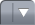
<style>
.page{position:relative;width:35px;height:25px;background:#a5abb6}
.page>*{position:absolute;margin:0}
.t1{font:12.8px "ArialMT";letter-spacing:0.1em;color:#ffffff;scale:1.25 1}
</style>
<div class="page">
<p class="t1" style="left:17px;top:8px;width:12px;height:9px">▼</p>
</div>
